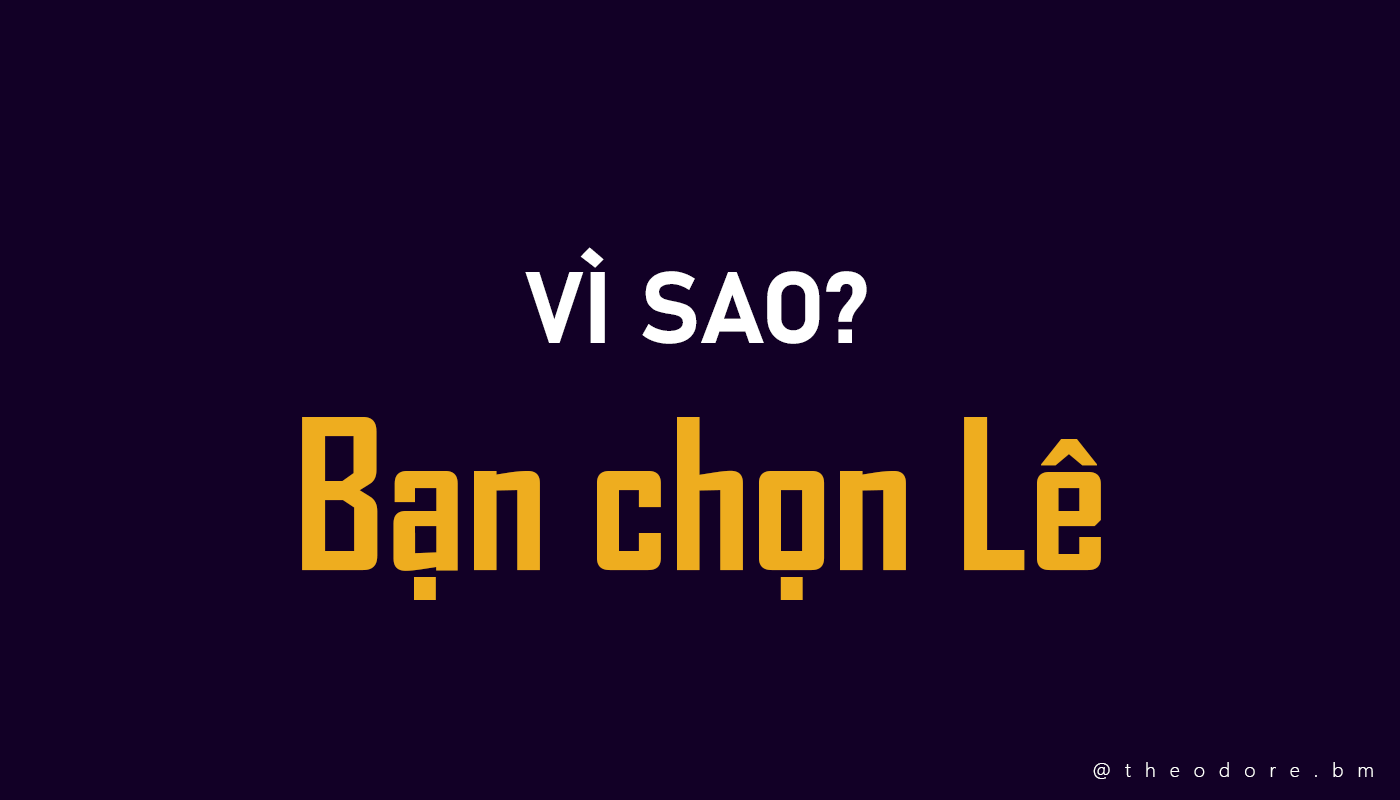
<style>
.page{position:relative;width:1400px;height:800px;background:#120026}
.page>*{position:absolute;margin:0}
.t1{font:100px "Bahnschrift-Bold";color:#ffffff}
.t2{font:200px "SVN-AgencyFBbold";color:#eead1f}
.t3{font:20px "SegoeUI-Light";letter-spacing:0.7em;color:#ffffff}
</style>
<div class="page">
<p class="t1" style="left:525px;top:247px;width:342px;height:97px">VÌ SAO?</p>
<p class="t2" style="left:302px;top:417px;width:799px;height:183px">Bạn chọn Lê</p>
<p class="t3" style="left:1093px;top:762px;width:280px;height:17px">@theodore.bm</p>
</div>
